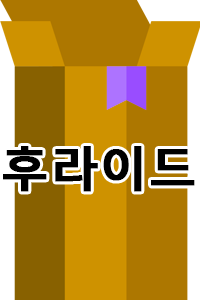
<style>
.page{position:relative;width:200px;height:300px;background:#ad7700}
.page>*{position:absolute;margin:0}
.t1{font:48px "MalgunGothicBold";color:#000000;font-weight:bold}
</style>
<div class="page">
<p class="t1" style="left:3px;top:146px;width:192px;height:46px">후라이드</p>
</div>
